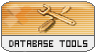
<style>
.page{position:relative;width:96px;height:53px}
.page>*{position:absolute;margin:0}
.t1{font:12px "Bit3";color:#100f0f;scale:0.83 1}
</style>
<div class="page">
<p class="t1" style="left:9px;top:40px;width:79px;height:7px">DATABASE TOOLS</p>
</div>
